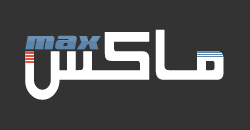
<style>
.page{position:relative;width:250px;height:130px;background:#333333}
.page>*{position:absolute;margin:0}
.t1{font:90px "BElham";color:#ffffff;scale:0.88 1}
.t2{font:30px "NationalyzeALP";color:#5b85aa;scale:0.88 1}
</style>
<div class="page">
<p class="t1" style="left:25px;top:29px;width:199px;height:71px">ﺲﻛﺎـﻣ</p>
<p class="t2" style="left:25px;top:35px;width:76px;height:15px">max</p>
</div>
